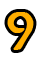
<style>
.page{position:relative;width:40px;height:60px;background:#ffffff}
.page>*{position:absolute;margin:0}
.t1{font:60px "Herculanum";color:#ffae00;font-weight:bold}
</style>
<div class="page">
<p class="t1" style="left:7px;top:12px;width:27px;height:38px">9</p>
</div>
